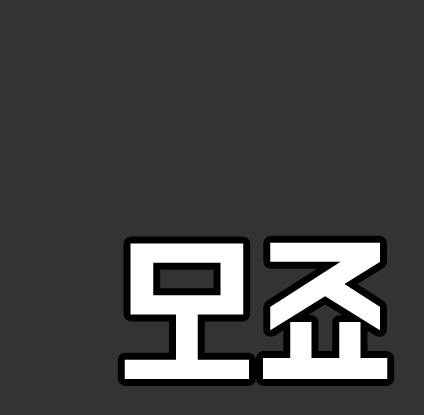
<style>
.page{position:relative;width:424px;height:415px;background:#333333}
.page>*{position:absolute;margin:0}
.t1{font:144px "BMDoHyeon";color:#ffffff}
</style>
<div class="page">
<p class="t1" style="left:124px;top:242px;width:264px;height:137px">모죠</p>
</div>
